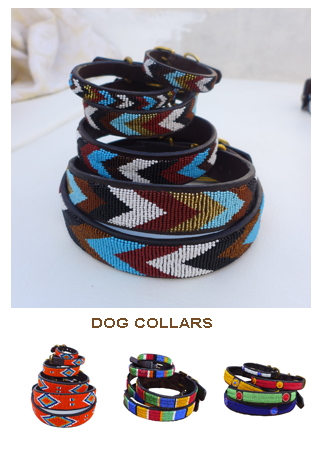
<style>
.page{position:relative;width:320px;height:450px;background:#ffffff}
.page>*{position:absolute;margin:0}
.t1{font:14px "Arial-BoldMT";color:#754c24;scale:1.19 1}
</style>
<div class="page">
<p class="t1" style="left:92px;top:318px;width:120px;height:10px">DOG COLLARS</p>
</div>
